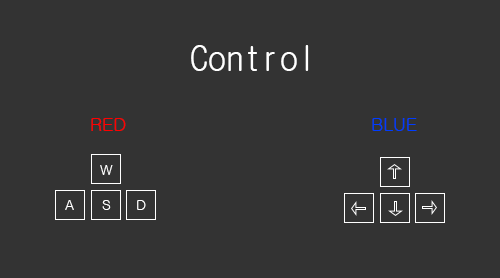
<style>
.page{position:relative;width:500px;height:278px;background:#333333}
.page>*{position:absolute;margin:0}
.t1{font:36px "GulimChe";color:#ffffff}
.t2{font:18px "Gulim";color:#ff0000}
.t3{font:18px "Gulim";color:#003cff}
.t4{font:14px "Gulim";color:#ffffff}
</style>
<div class="page">
<p class="t1" style="left:191px;top:45px;width:118px;height:26px">Control</p>
<p class="t2" style="left:91px;top:118px;width:35px;height:13px">RED</p>
<p class="t3" style="left:372px;top:118px;width:45px;height:13px">BLUE</p>
<p class="t4" style="left:100px;top:165px;width:13px;height:10px">W</p>
<p class="t4" style="left:65px;top:200px;width:9px;height:10px">A</p>
<p class="t4" style="left:102px;top:200px;width:9px;height:10px">S</p>
<p class="t4" style="left:137px;top:200px;width:9px;height:10px">D</p>
</div>
